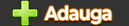
<style>
.page{position:relative;width:129px;height:26px;background:#333333}
.page>*{position:absolute;margin:0}
.t1{font:19.4px "Montserrat-Bold";letter-spacing:-0.04em;color:#ffffff;scale:0.9 1}
</style>
<div class="page">
<p class="t1" style="left:44px;top:5px;width:68px;height:19px">Adauga</p>
</div>
